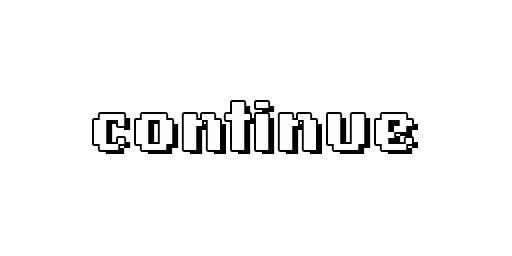
<style>
.page{position:relative;width:512px;height:256px;background:#ffffff}
.page>*{position:absolute;margin:0}
.t1{font:72px "LoRes12OT-Bold";color:#fefefe}
.t2{font:72px "LoRes12OT-Bold"}
</style>
<div class="page">
<p class="t1" style="left:94px;top:102px;width:318px;height:48px">continue</p>
<p class="t2" style="left:100px;top:106px;width:318px;height:48px">continue</p>
</div>
